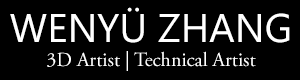
<style>
.page{position:relative;width:300px;height:80px;background:#000000}
.page>*{position:absolute;margin:0}
.t1{font:20px/24px "AGaramondPro-Regular";color:#ffffff}
.t2{font:40px/34px "SegoeUI";color:#ffffff}
</style>
<div class="page">
<p class="t1" style="left:10px;top:7px;width:280px;height:64px;text-align:center"><span class="t2">WENYÜ ZHANG<br></span>3D Artist | Technical Artist</p>
</div>
